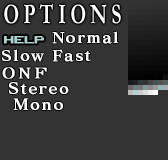
<style>
.page{position:relative;width:168px;height:160px;background:#333333}
.page>*{position:absolute;margin:0}
.t1{font:14.6px "MatisseProN-B";letter-spacing:0.1em;color:#ffffff;scale:1.08 1}
.t2{font:15px/16px "MatisseProN-B";letter-spacing:0.1em;color:#ffffff;scale:1.05 1}
</style>
<div class="page">
<p class="t1" style="left:52px;top:31px;width:67px;height:13px">Normal</p>
<p class="t1" style="left:1px;top:49px;width:90px;height:13px">Slow Fast</p>
<p class="t2" style="left:8px;top:82px;width:61px;height:28px;text-align:center">Stereo<br>Mono</p>
</div>
